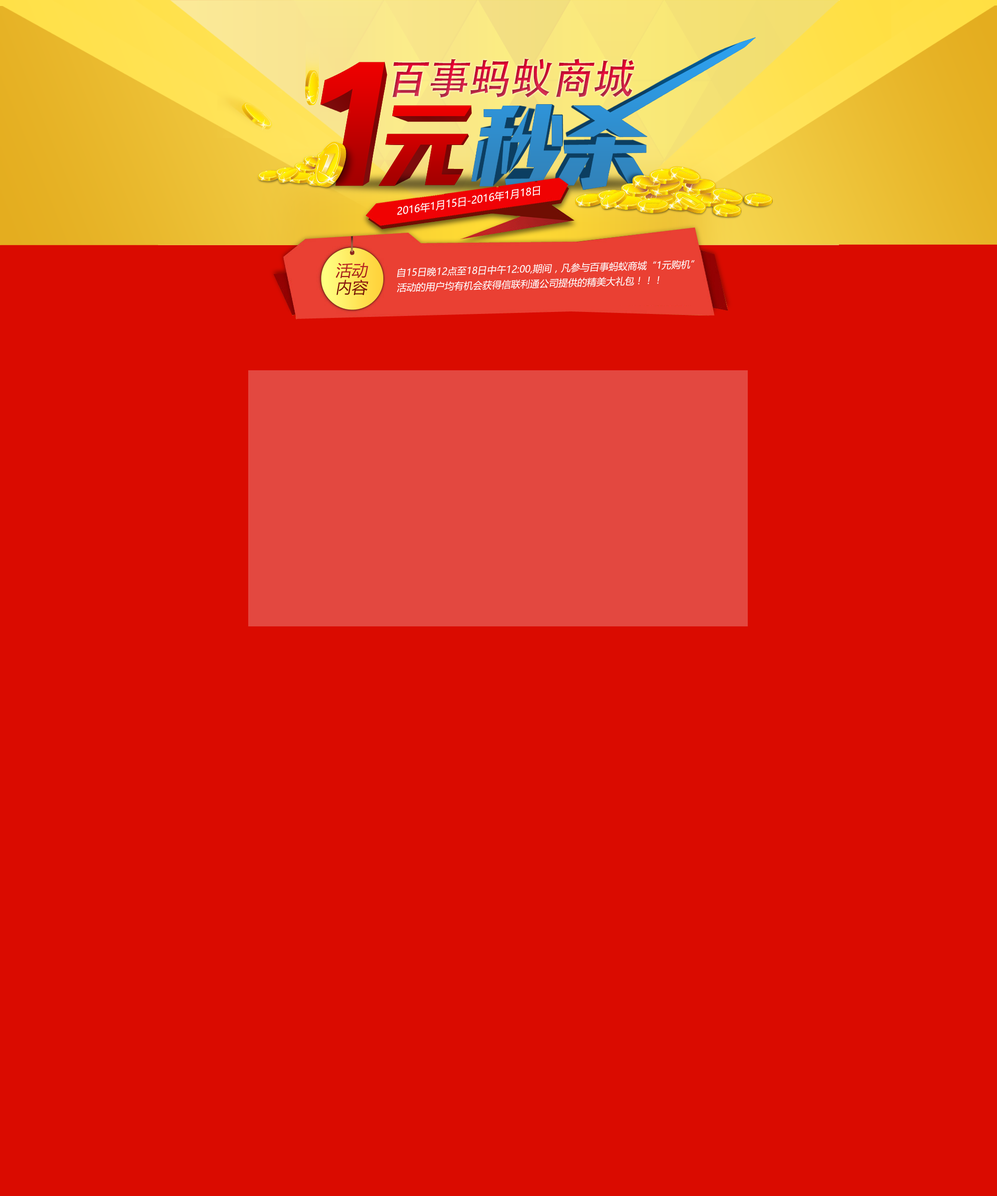
<style>
.page{position:relative;width:997px;height:1196px;background:#da0b00}
.page>*{position:absolute;margin:0}
.t1{font:178.4px "FZZYFW--GB1-0";font-style:italic}
.t2{font:41.4px "AdobeHeitiStd-Regular";font-style:italic}
.t3{font:89.4px "JLinXin";font-style:italic}
.t4{font:10px "MicrosoftYaHei";color:#ffffff;font-style:italic}
.t5{font:15.9px/16.9px "MicrosoftYaHei";font-style:italic}
.t6{font:9.5px/15px "MicrosoftYaHei";color:#ffffff;font-style:italic}
</style>
<div class="page">
<p class="t1" style="left:320px;top:62px;width:65px;height:124px">1</p>
<p class="t2" style="left:392px;top:58px;width:242px;height:40px">百事蚂蚁商城</p>
<p class="t3" style="left:378px;top:105px;width:94px;height:81px">元</p>
<p class="t4" style="left:397px;top:186px;width:143px;height:29px;rotate:-9deg">2016年1月15日-2016年1月18日</p>
<p class="t5" style="left:335px;top:263px;width:33px;height:32px;text-align:center">活动<br>内容</p>
<p class="t6" style="left:397px;top:260px;width:298px;height:33px;rotate:-2deg">自15日晚12点至18日中午12:00,期间，凡参与百事蚂蚁商城“1元购机”<br>活动的用户均有机会获得信联利通公司提供的精美大礼包！！！</p>
</div>
